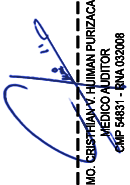
<style>
.page{position:relative;width:130px;height:185px;background:#ffffff}
.page>*{position:absolute;margin:0}
.t1{font:66.8px "Calibri-Light";color:#000000;scale:0.84 1}
.t2{font:12.1px "ArialMT";color:#000000;scale:0.84 1}
.t3{font:69px "ArialMT";color:#000000;scale:0.84 1}
</style>
<div class="page">
<p class="t1" style="left:76px;top:1px;width:4px;height:184px;rotate:-90deg">-----------</p>
<p class="t2" style="left:86px;top:0px;width:39px;height:185px;text-align:center;rotate:-90deg"><span class="t3"><br></span>MO. CRISTHIAN V. HUIMAN PURIZACA<br>MEDICO AUDITOR<br>CMP 54831 - RNA 032008</p>
<p class="t2" style="left:86px;top:0px;width:39px;height:185px;text-align:center;rotate:-90deg"><span class="t3"><br></span>MO. CRISTHIAN V. HUIMAN PURIZACA<br>MEDICO AUDITOR<br>CMP 54831 - RNA 032008</p>
<p class="t2" style="left:86px;top:0px;width:39px;height:185px;text-align:center;rotate:-90deg"><span class="t3"><br></span>MO. CRISTHIAN V. HUIMAN PURIZACA<br>MEDICO AUDITOR<br>CMP 54831 - RNA 032008</p>
</div>
